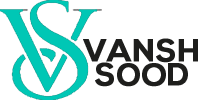
<style>
.page{position:relative;width:200px;height:100px;background:#ffffff}
.page>*{position:absolute;margin:0}
.t1{font:31.2px/24.3px "NexaBold";color:#1e1e1c;font-weight:bold}
</style>
<div class="page">
<p class="t1" style="left:83px;top:38px;width:115px;height:49px;text-align:center">VANSH<br>SOOD</p>
</div>
